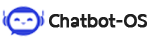
<style>
.page{position:relative;width:150px;height:40px;background:#ffffff}
.page>*{position:absolute;margin:0}
.t1{font:25px "ThaiSansNeue-SemiBold";color:#1f1f1f;font-weight:bold}
</style>
<div class="page">
<p class="t1" style="left:49px;top:14px;width:98px;height:14px">Chatbot-OS</p>
</div>
